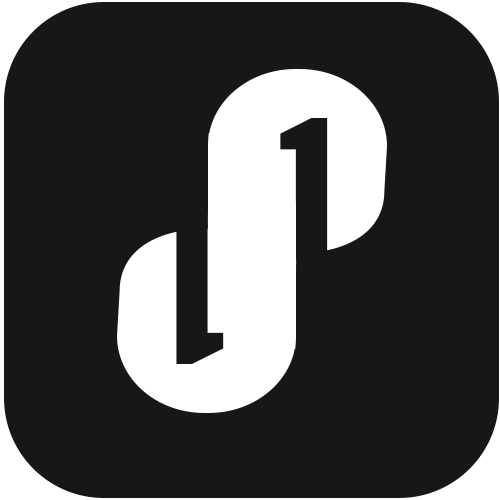
<style>
.page{position:relative;width:500px;height:500px;background:#181616}
.page>*{position:absolute;margin:0}
.t1{font:187.4px "Silom";letter-spacing:-0.025em;color:#181616}
.t2{font:187.3px "Silom";letter-spacing:-0.025em;color:#181616}
</style>
<div class="page">
<p class="t1" style="left:280px;top:118px;width:48px;height:141px">1</p>
<p class="t2" style="left:176px;top:224px;width:48px;height:140px;rotate:180deg">1</p>
</div>
